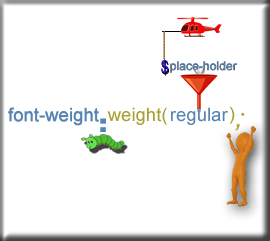
<style>
.page{position:relative;width:270px;height:241px;background:#ffffff}
.page>*{position:absolute;margin:0}
.t1{font:16.1px "HelveticaLTStd-Cond"}
.t2{font:16.1px "HelveticaLTStd-Cond";color:#3411ea}
.t3{font:16.1px "HelveticaLTStd-Cond";color:#000000}
.t4{font:12.2px "ArialMT";color:#5884b2}
.t5{font:18.6px "ArialMT";color:#5884b2}
.t6{font:18.6px "ArialMT";color:#a7a034}
</style>
<div class="page">
<p class="t1" style="left:161px;top:60px;width:8px;height:15px">$</p>
<p class="t2" style="left:161px;top:59px;width:8px;height:15px">$</p>
<p class="t3" style="left:162px;top:61px;width:7px;height:15px">$</p>
<p class="t4" style="left:170px;top:61px;width:67px;height:12px">place-holder</p>
<p class="t5" style="left:8px;top:107px;width:91px;height:18px">font-weight</p>
<p class="t6" style="left:107px;top:107px;width:60px;height:18px">weight(</p>
<p class="t5" style="left:171px;top:107px;width:57px;height:18px">regular</p>
</div>
